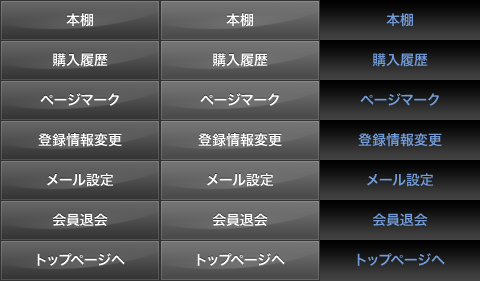
<style>
.page{position:relative;width:480px;height:281px}
.page>*{position:absolute;margin:0}
.t1{font:14px "HiraKakuPro-W6";color:#ffffff}
.t2{font:14px "HiraKakuPro-W6";color:#729bd5}
</style>
<div class="page">
<p class="t1" style="left:66px;top:13px;width:27px;height:14px">本棚</p>
<p class="t1" style="left:226px;top:13px;width:27px;height:14px">本棚</p>
<p class="t2" style="left:386px;top:13px;width:27px;height:14px">本棚</p>
<p class="t1" style="left:52px;top:53px;width:56px;height:14px">購入履歴</p>
<p class="t1" style="left:212px;top:53px;width:56px;height:14px">購入履歴</p>
<p class="t2" style="left:372px;top:53px;width:56px;height:14px">購入履歴</p>
<p class="t1" style="left:40px;top:93px;width:79px;height:13px">ページマーク</p>
<p class="t1" style="left:200px;top:93px;width:79px;height:13px">ページマーク</p>
<p class="t2" style="left:360px;top:93px;width:79px;height:13px">ページマーク</p>
<p class="t1" style="left:38px;top:133px;width:84px;height:14px">登録情報変更</p>
<p class="t1" style="left:198px;top:133px;width:84px;height:14px">登録情報変更</p>
<p class="t2" style="left:358px;top:133px;width:84px;height:14px">登録情報変更</p>
<p class="t1" style="left:46px;top:173px;width:68px;height:14px">メール設定</p>
<p class="t1" style="left:206px;top:173px;width:68px;height:14px">メール設定</p>
<p class="t2" style="left:366px;top:173px;width:68px;height:14px">メール設定</p>
<p class="t1" style="left:52px;top:213px;width:56px;height:13px">会員退会</p>
<p class="t1" style="left:212px;top:213px;width:56px;height:13px">会員退会</p>
<p class="t2" style="left:372px;top:213px;width:56px;height:13px">会員退会</p>
<p class="t1" style="left:37px;top:253px;width:88px;height:13px">トップページへ</p>
<p class="t1" style="left:197px;top:253px;width:88px;height:13px">トップページへ</p>
<p class="t2" style="left:357px;top:253px;width:88px;height:13px">トップページへ</p>
</div>
